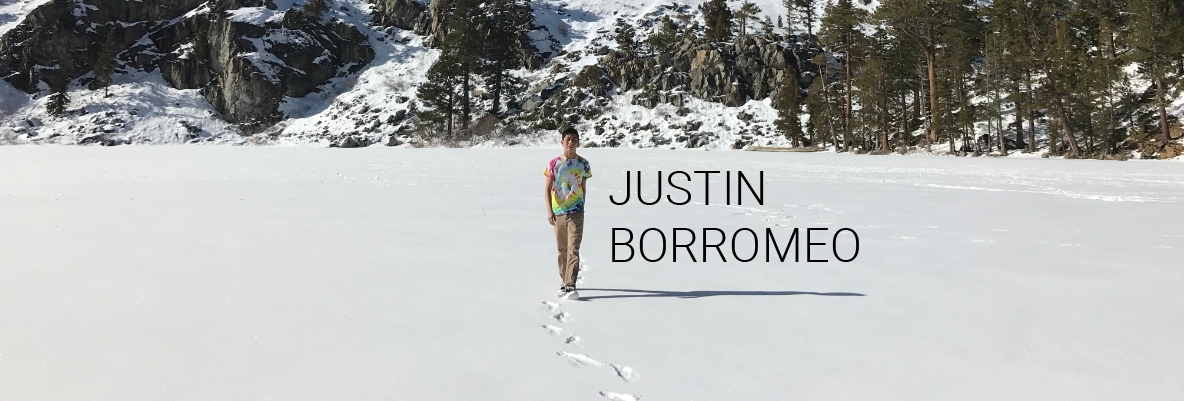
<style>
.page{position:relative;width:1184px;height:401px}
.page>*{position:absolute;margin:0}
.t1{font:47.5px "Roboto-Light";color:#000000}
</style>
<div class="page">
<p class="t1" style="left:609px;top:171px;width:250px;height:91px">JUSTIN<br>BORROMEO</p>
</div>
